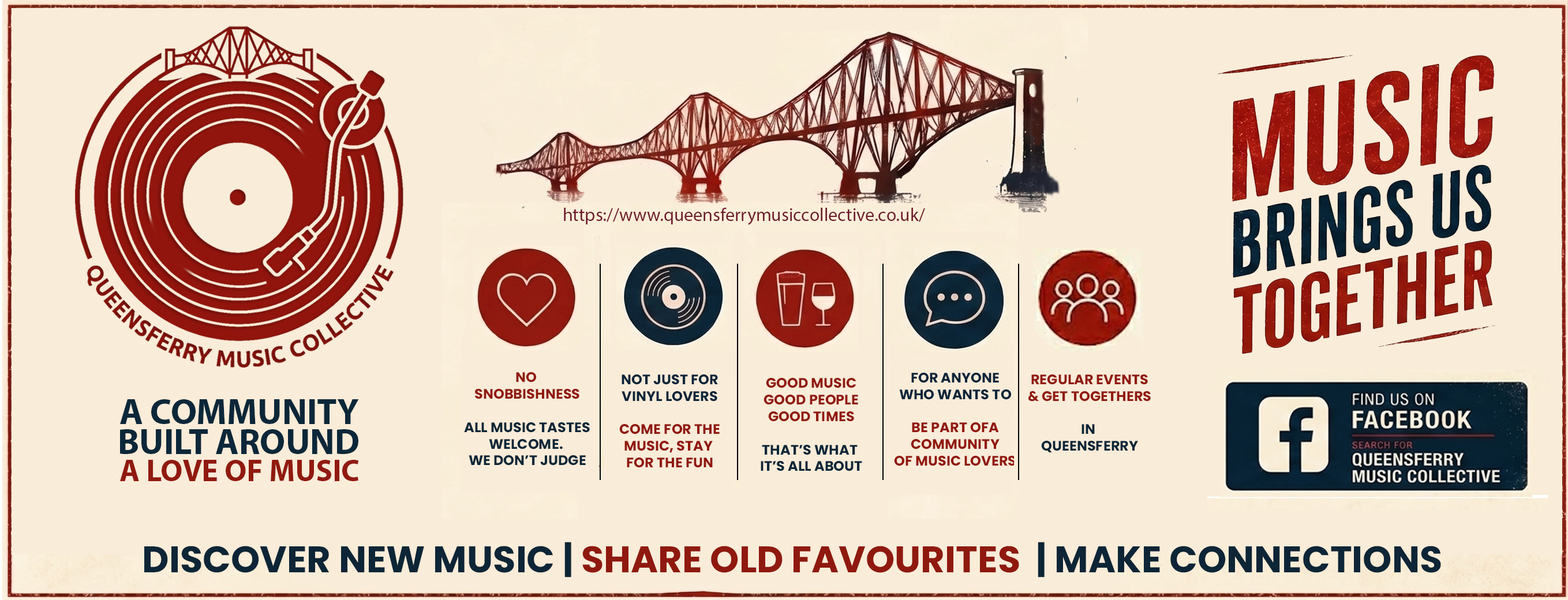
<style>
.page{position:relative;width:1568px;height:600px;background:#f9ecd9}
.page>*{position:absolute;margin:0}
.t1{font:18.5px "MyriadPro-Regular";color:#6e1b2b}
.t2{font:13.9px "Poppins-Bold";color:#0c2638}
.t3{font:13.9px "Poppins-Bold";color:#911a10}
.t4{font:13.9px "Poppins-Bold";color:#91180f}
.t5{font:13.9px "Poppins-Bold";color:#0b253a}
.t6{font:13.9px "Poppins-Bold";color:#92180e}
.t7{font:10.8px "MyriadPro-Bold";color:#0c2739}
.t8{font:10.8px "MyriadPro-Bold";color:#911a10}
.t9{font:36.9px "Poppins-Bold";color:#0d2536}
.t10{font:36.9px "Poppins-Bold";color:#8f190f}
</style>
<div class="page">
<p class="t1" style="left:564px;top:208px;width:361px;height:17px">https://www.queensferrymusiccollective.co.uk/</p>
<p class="t2" style="left:464px;top:372px;width:126px;height:94px;text-align:center"><span class="t3">NO <br>SNOBBISHNESS<br><br></span>ALL MUSIC TASTES<br>WELCOME. <br>WE DON’T JUDGE</p>
<p class="t4" style="left:619px;top:375px;width:101px;height:93px;text-align:center"><span class="t5">NOT JUST FOR<br>VINYL LOVERS<br></span><br>COME FOR THE<br>MUSIC, STAY <br>FOR THE FUN</p>
<p class="t6" style="left:894px;top:373px;width:122px;height:93px;text-align:center"><span class="t5">FOR ANYONE <br>WHO WANTS TO <br></span><br>BE PART OFA <br>COMMUNITY <br>OF MUSIC LOVERS</p>
<p class="t3" style="left:1028px;top:375px;width:123px;height:77px;text-align:center">REGULAR EVENTS<br>&amp; GET TOGETHERS<br><span class="t2"><br>IN <br>QUEENSFERRY</span></p>
<p class="t3" style="left:761px;top:378px;width:101px;height:93px;text-align:center">GOOD MUSIC<br>GOOD PEOPLE<br>GOOD TIMES<br><br><span class="t2">THAT’S WHAT <br>IT’S ALL ABOUT</span></p>
<p class="t7" style="left:120px;top:399px;width:239px;height:82px">A COMMUNITY <br>BUILT AROUND<br><span class="t8">A LOVE OF MUSIC</span></p>
<p class="t9" style="left:144px;top:542px;width:1297px;height:36px">DISCOVER NEW MUSIC | <span class="t10">SHARE OLD FAVOURITES </span> | MAKE CONNECTIONS</p>
</div>
